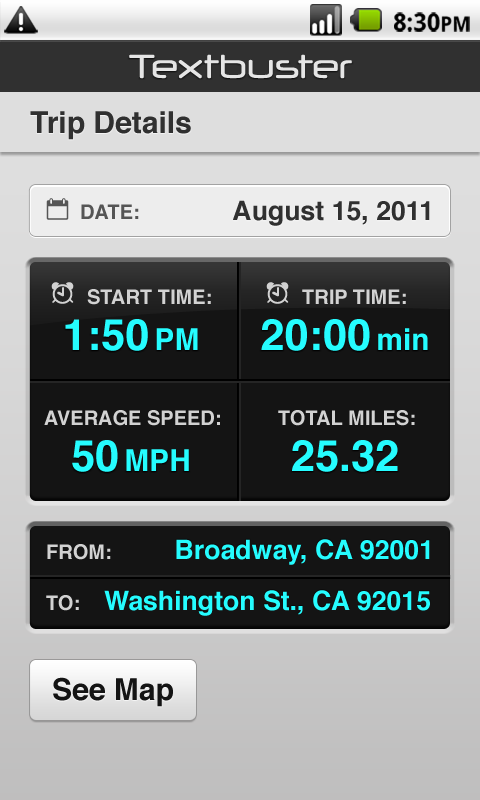
<style>
.page{position:relative;width:480px;height:800px;background:#141414}
.page>*{position:absolute;margin:0}
.t1{font:24px "DroidSans-Bold";letter-spacing:0.005em;color:#000000}
.t2{font:20px "DroidSans-Bold";letter-spacing:0.005em;color:#000000}
.t3{font:30px "Helvetica-Bold";color:#303030}
.t4{font:20px "Helvetica-Bold";color:#555555;text-transform:uppercase}
.t5{font:26.7px "Helvetica-Bold";color:#303030}
.t6{font:20px "Helvetica-Bold";color:#d2d2d2;text-transform:uppercase}
.t7{font:43.3px "Helvetica-Bold";color:#25fcff}
.t8{font:30px "Helvetica-Bold";color:#25fcff}
.t9{font:26.7px "Helvetica-Bold";color:#25fcff}
.t10{font:30px "Helvetica-Bold";color:#141414}
</style>
<div class="page">
<p class="t1" style="left:394px;top:12px;width:76px;height:20px">8:30<span class="t2">PM</span></p>
<p class="t3" style="left:30px;top:111px;width:161px;height:29px">Trip Details</p>
<p class="t4" style="left:81px;top:204px;width:58px;height:15px">Date:</p>
<p class="t5" style="left:233px;top:200px;width:197px;height:26px">August 15, 2011</p>
<p class="t6" style="left:87px;top:289px;width:124px;height:16px">Start Time:</p>
<p class="t6" style="left:302px;top:289px;width:104px;height:15px">Trip Time:</p>
<p class="t7" style="left:65px;top:319px;width:133px;height:32px">1:50<span class="t8">PM</span></p>
<p class="t7" style="left:261px;top:319px;width:167px;height:32px">20:00<span class="t8">min</span></p>
<p class="t6" style="left:44px;top:410px;width:176px;height:16px">Average speed:</p>
<p class="t6" style="left:278px;top:410px;width:137px;height:16px">Total miles:</p>
<p class="t8" style="left:72px;top:440px;width:117px;height:32px"><span class="t7">50</span>MPH</p>
<p class="t7" style="left:292px;top:440px;width:106px;height:32px">25.32</p>
<p class="t6" style="left:47px;top:544px;width:64px;height:16px">From:</p>
<p class="t9" style="left:176px;top:539px;width:254px;height:26px">Broadway, CA 92001</p>
<p class="t9" style="left:104px;top:590px;width:326px;height:26px">Washington St., CA 92015</p>
<p class="t6" style="left:46px;top:595px;width:33px;height:16px">To:</p>
<p class="t10" style="left:53px;top:677px;width:120px;height:30px">See Map</p>
</div>
